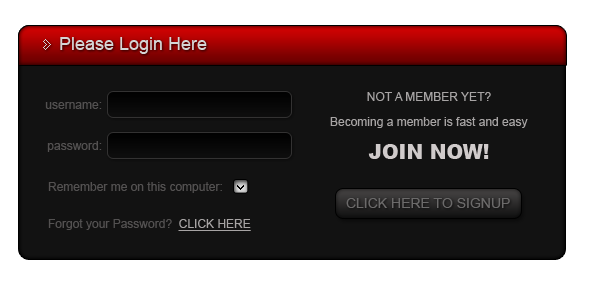
<style>
.page{position:relative;width:592px;height:290px;background:#121212}
.page>*{position:absolute;margin:0}
.t1{font:18px "ArialMT";color:#d5d5d5}
.t2{font:12px "ArialMT";color:#535151}
.t3{font:12px "ArialMT";color:#a7a4a4}
.t4{font:20px "Arial-Black";color:#d0cbcb}
.t5{font:14px "ArialMT";color:#6b6a6a}
.t6{font:12px "ArialMT";color:#a7a4a4;text-decoration:underline}
</style>
<div class="page">
<p class="t1" style="left:60px;top:37px;width:147px;height:17px">Please Login Here</p>
<p class="t2" style="left:45px;top:102px;width:57px;height:7px">username:</p>
<p class="t3" style="left:367px;top:92px;width:124px;height:9px">NOT A MEMBER YET?</p>
<p class="t3" style="left:330px;top:117px;width:198px;height:11px">Becoming a member is fast and easy</p>
<p class="t2" style="left:47px;top:141px;width:55px;height:11px">password:</p>
<p class="t4" style="left:368px;top:144px;width:121px;height:15px">JOIN NOW!</p>
<p class="t2" style="left:48px;top:182px;width:174px;height:11px">Remember me on this computer:</p>
<p class="t5" style="left:346px;top:198px;width:164px;height:10px">CLICK HERE TO SIGNUP</p>
<p class="t2" style="left:48px;top:219px;width:203px;height:12px">Forgot your Password?  <span class="t6">CLICK HERE</span></p>
</div>
